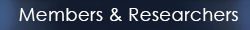
<style>
.page{position:relative;width:250px;height:30px;background:#121c2e}
.page>*{position:absolute;margin:0}
.t1{font:18px "CenturyGothic";letter-spacing:0.025em;color:#ffffff}
</style>
<div class="page">
<p class="t1" style="left:19px;top:8px;width:219px;height:13px">Members &amp; Researchers</p>
</div>
